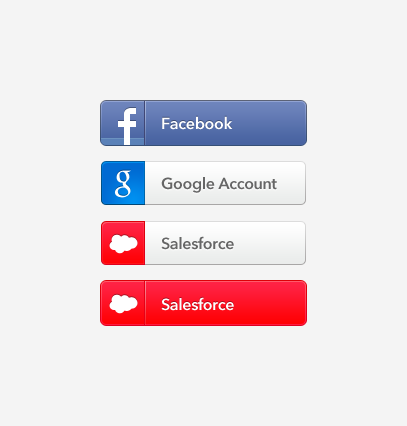
<style>
.page{position:relative;width:407px;height:426px;background:#f4f4f4}
.page>*{position:absolute;margin:0}
.t1{font:16px "AvenirNextLTPro-Demi";letter-spacing:-0.02em;color:#ffffff}
.t2{font:16px "AvenirNextLTPro-Demi";letter-spacing:-0.02em;color:#666666}
</style>
<div class="page">
<p class="t1" style="left:162px;top:116px;width:71px;height:14px">Facebook</p>
<p class="t2" style="left:161px;top:177px;width:116px;height:16px">Google Account</p>
<p class="t2" style="left:161px;top:236px;width:73px;height:14px">Salesforce</p>
<p class="t1" style="left:161px;top:297px;width:73px;height:14px">Salesforce</p>
</div>
